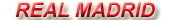
<style>
.page{position:relative;width:178px;height:20px}
.page>*{position:absolute;margin:0}
.t1{font:20px "Arial-BoldItalicMT"}
</style>
<div class="page">
<p class="t1" style="left:15px;top:2px;width:140px;height:15px">REAL MADRID</p>
</div>
